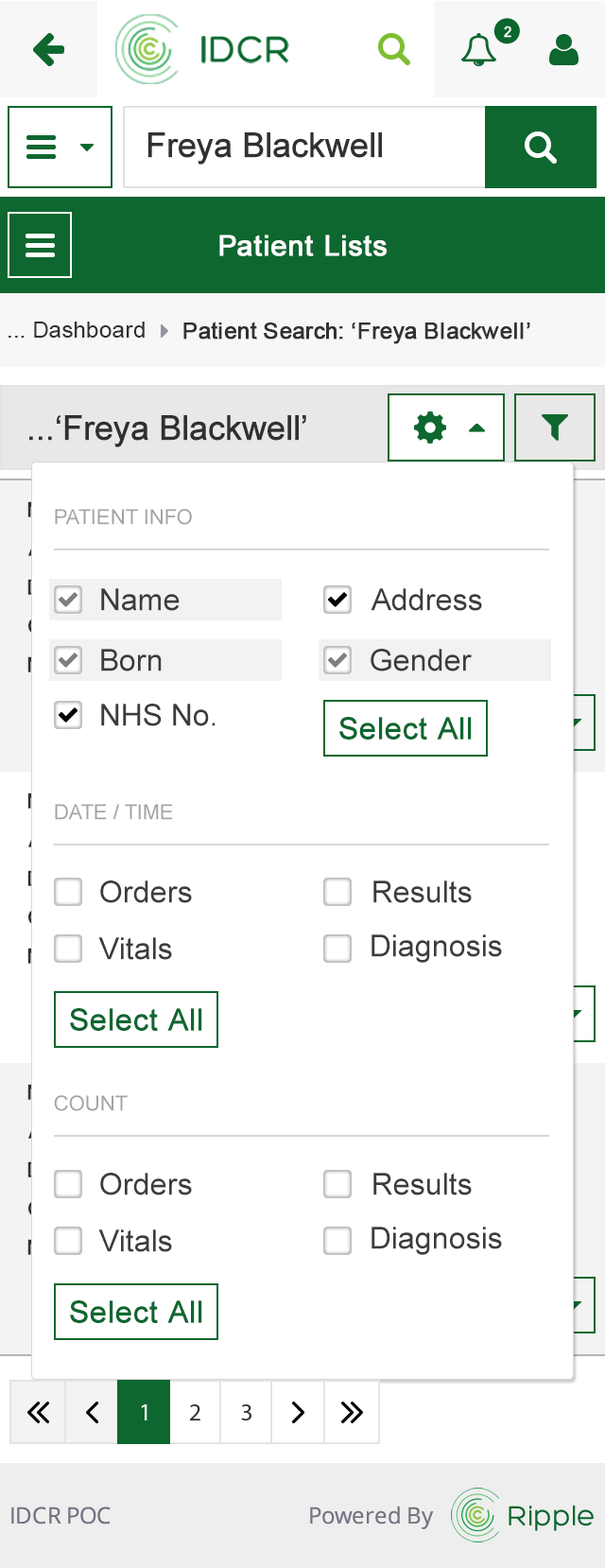
<style>
.page{position:relative;width:605px;height:1568px;background:#ffffff}
.page>*{position:absolute;margin:0}
.t1{font:34px "ArialMT";color:#313131;font-weight:bold}
.t2{font:28.4px "ArialMT";color:#ffffff;font-weight:bold}
.t3{font:22.7px "ArialMT";color:#313131}
.t4{font:22.7px "ArialMT";color:#313131;font-weight:bold}
.t5{font:34px "ArialMT";color:#303030;font-weight:bold}
.t6{font:20.8px "ArialMT";color:#a3a3a3}
.t7{font:30.3px "ArialMT";color:#3c3c3c}
.t8{font:30.3px "ArialMT";color:#0d672f;font-weight:bold}
</style>
<div class="page">
<p class="t1" style="left:148px;top:132px;width:234px;height:33px">Freya Blackwell</p>
<p class="t2" style="left:219px;top:235px;width:168px;height:21px">Patient Lists</p>
<p class="t3" style="left:9px;top:322px;width:136px;height:16px">... Dashboard</p>
<p class="t4" style="left:183px;top:322px;width:348px;height:22px">Patient Search: ‘Freya Blackwell’</p>
<p class="t5" style="left:29px;top:415px;width:277px;height:32px">...‘Freya Blackwell’</p>
<p class="t6" style="left:55px;top:509px;width:137px;height:16px">PATIENT INFO</p>
<p class="t7" style="left:101px;top:588px;width:79px;height:23px">Name</p>
<p class="t7" style="left:371px;top:588px;width:111px;height:23px">Address</p>
<p class="t7" style="left:101px;top:649px;width:61px;height:22px">Born</p>
<p class="t7" style="left:371px;top:649px;width:101px;height:22px">Gender</p>
<p class="t7" style="left:101px;top:704px;width:115px;height:22px">NHS No.</p>
<p class="t8" style="left:340px;top:717px;width:132px;height:23px">Select All</p>
<p class="t6" style="left:55px;top:804px;width:118px;height:16px">DATE / TIME</p>
<p class="t7" style="left:100px;top:880px;width:92px;height:23px">Orders</p>
<p class="t7" style="left:374px;top:880px;width:98px;height:23px">Results</p>
<p class="t7" style="left:98px;top:937px;width:74px;height:23px">Vitals</p>
<p class="t7" style="left:372px;top:934px;width:130px;height:29px">Diagnosis</p>
<p class="t8" style="left:70px;top:1008px;width:132px;height:23px">Select All</p>
<p class="t6" style="left:54px;top:1095px;width:74px;height:16px">COUNT</p>
<p class="t7" style="left:100px;top:1173px;width:92px;height:22px">Orders</p>
<p class="t7" style="left:374px;top:1173px;width:98px;height:22px">Results</p>
<p class="t7" style="left:98px;top:1229px;width:74px;height:23px">Vitals</p>
<p class="t7" style="left:372px;top:1227px;width:130px;height:28px">Diagnosis</p>
<p class="t8" style="left:70px;top:1300px;width:132px;height:23px">Select All</p>
</div>
